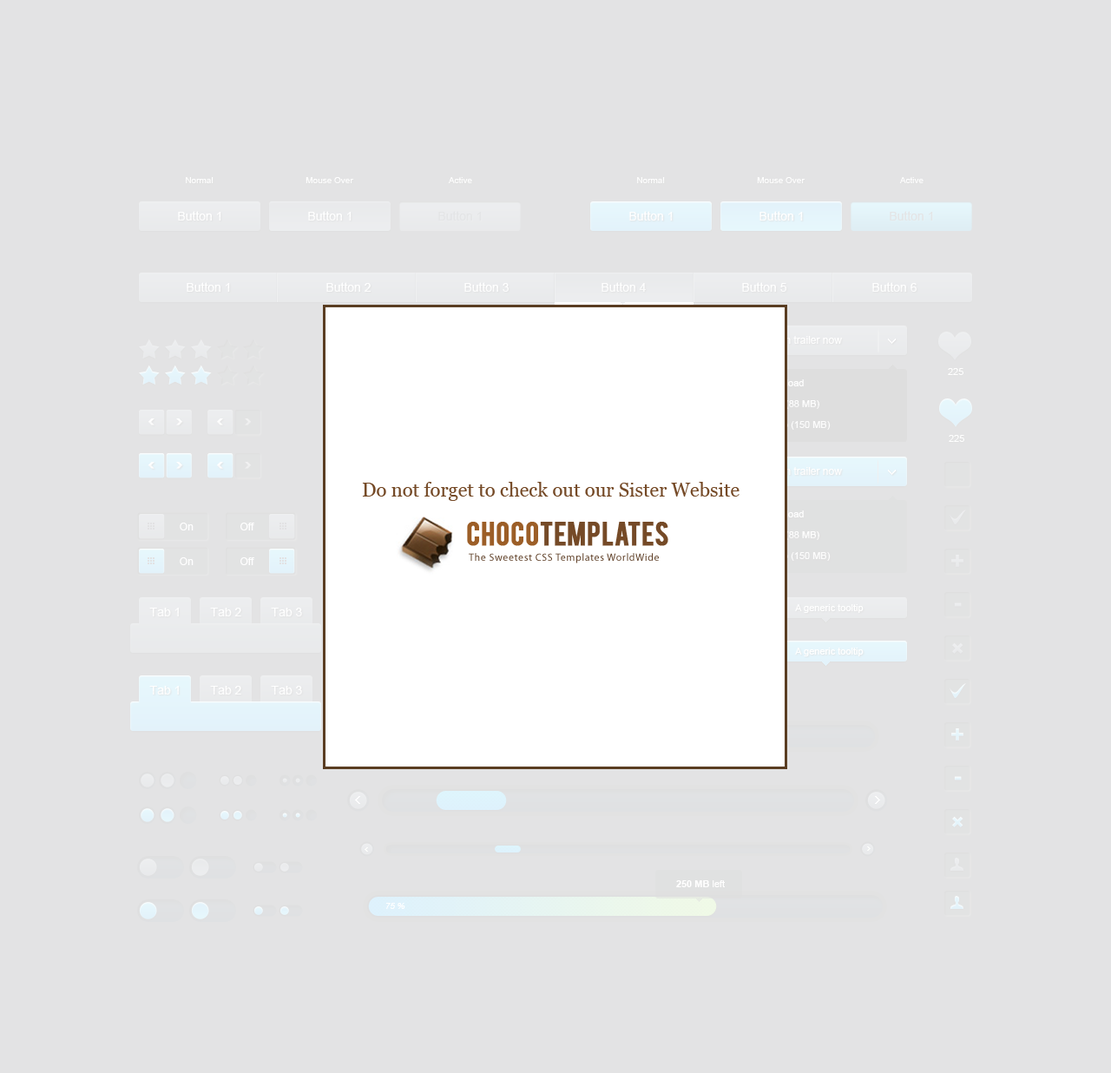
<style>
.page{position:relative;width:1111px;height:1073px;background:#e3e3e4}
.page>*{position:absolute;margin:0}
.t1{font:8.7px "ArialMT";color:#ffffff}
.t2{font:12.2px "ArialMT";color:#ffffff}
.t3{font:12.2px "ArialMT";color:#e4e5e6}
.t4{font:9.5px "ArialMT";color:#ffffff}
.t5{font:10.4px "ArialMT";color:#ffffff}
.t6{font:9.5px "Arial-BoldMT";color:#ffffff}
.t7{font:8.7px "Arial-ItalicMT";color:#ffffff}
</style>
<div class="page">
<p class="t1" style="left:186px;top:177px;width:28px;height:6px">Normal</p>
<p class="t1" style="left:306px;top:177px;width:48px;height:6px">Mouse Over</p>
<p class="t1" style="left:448px;top:177px;width:24px;height:6px">Active</p>
<p class="t1" style="left:637px;top:177px;width:28px;height:6px">Normal</p>
<p class="t1" style="left:757px;top:177px;width:49px;height:6px">Mouse Over</p>
<p class="t1" style="left:899px;top:177px;width:25px;height:6px">Active</p>
<p class="t2" style="left:178px;top:211px;width:43px;height:10px">Button 1</p>
<p class="t2" style="left:308px;top:211px;width:44px;height:10px">Button 1</p>
<p class="t3" style="left:438px;top:211px;width:44px;height:10px">Button 1</p>
<p class="t2" style="left:629px;top:211px;width:44px;height:10px">Button 1</p>
<p class="t2" style="left:760px;top:211px;width:43px;height:10px">Button 1</p>
<p class="t3" style="left:890px;top:211px;width:43px;height:10px">Button 1</p>
<p class="t2" style="left:187px;top:282px;width:43px;height:10px">Button 1</p>
<p class="t2" style="left:326px;top:282px;width:45px;height:10px">Button 2</p>
<p class="t2" style="left:464px;top:282px;width:45px;height:10px">Button 3</p>
<p class="t2" style="left:602px;top:282px;width:44px;height:10px">Button 4</p>
<p class="t2" style="left:742px;top:282px;width:45px;height:10px">Button 5</p>
<p class="t2" style="left:873px;top:282px;width:44px;height:10px">Button 6</p>
<p class="t4" style="left:948px;top:368px;width:16px;height:7px">225</p>
<p class="t4" style="left:949px;top:435px;width:16px;height:7px">225</p>
<p class="t5" style="left:180px;top:523px;width:14px;height:7px">On</p>
<p class="t5" style="left:240px;top:523px;width:14px;height:7px">Off</p>
<p class="t5" style="left:180px;top:557px;width:14px;height:8px">On</p>
<p class="t5" style="left:240px;top:557px;width:14px;height:8px">Off</p>
<p class="t4" style="left:795px;top:604px;width:69px;height:9px">A generic tooltip</p>
<p class="t2" style="left:149px;top:608px;width:30px;height:8px">Tab 1</p>
<p class="t2" style="left:210px;top:608px;width:31px;height:8px">Tab 2</p>
<p class="t2" style="left:271px;top:608px;width:31px;height:8px">Tab 3</p>
<p class="t4" style="left:795px;top:648px;width:69px;height:8px">A generic tooltip</p>
<p class="t2" style="left:149px;top:686px;width:30px;height:9px">Tab 1</p>
<p class="t2" style="left:210px;top:686px;width:31px;height:9px">Tab 2</p>
<p class="t2" style="left:271px;top:686px;width:31px;height:9px">Tab 3</p>
<p class="t6" style="left:676px;top:880px;width:49px;height:7px">250 MB<span class="t4"> left</span></p>
<p class="t7" style="left:385px;top:903px;width:20px;height:6px">75 %</p>
</div>
